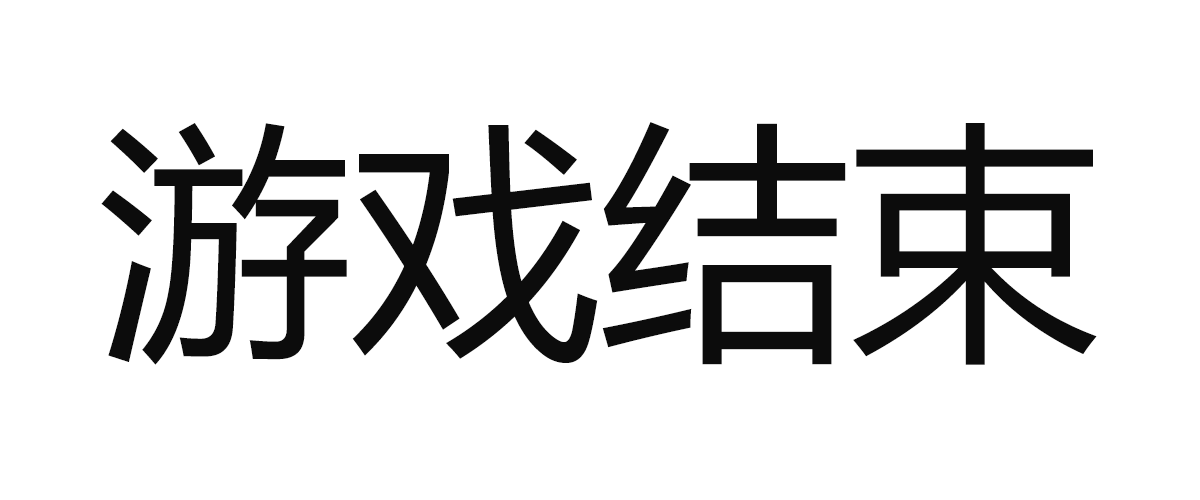
<style>
.page{position:relative;width:1200px;height:500px;background:#ffffff}
.page>*{position:absolute;margin:0}
.t1{font:250px "MicrosoftYaHei";color:#0c0c0c}
</style>
<div class="page">
<p class="t1" style="left:101px;top:122px;width:996px;height:243px">游戏结束</p>
</div>
